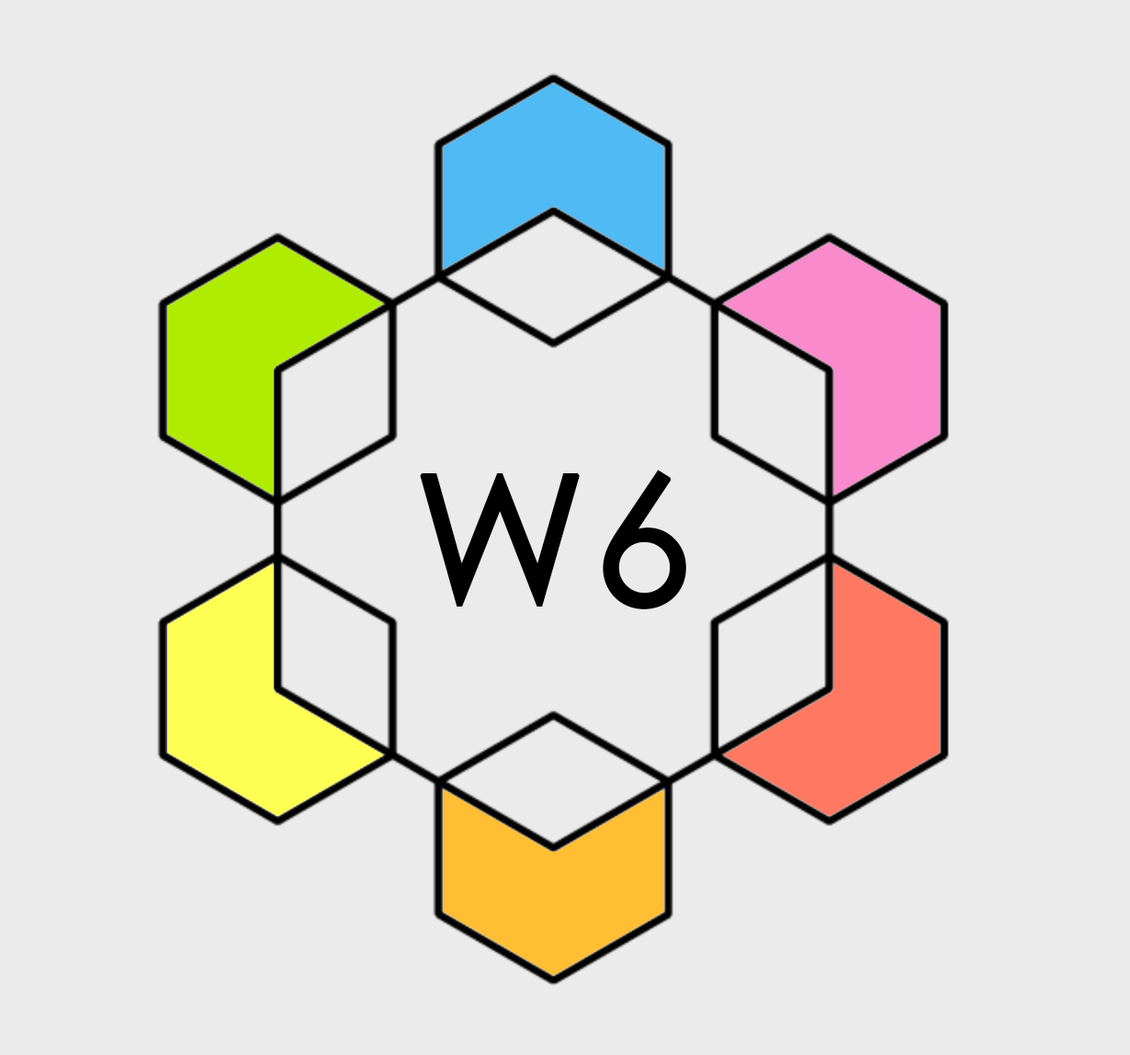
<style>
.page{position:relative;width:1130px;height:1055px;background:#ebebeb}
.page>*{position:absolute;margin:0}
.t1{font:179.8px "CenturyGothic";letter-spacing:0.01em;color:#000000;font-weight:bold}
</style>
<div class="page">
<p class="t1" style="left:420px;top:470px;width:266px;height:139px">W6</p>
</div>
